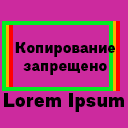
<style>
.page{position:relative;width:128px;height:128px;background:#cc2a9e}
.page>*{position:absolute;margin:0}
.t1{font:14.7px "Asket-ExtraBold";color:#000000}
.t2{font:18.7px "Asket-ExtraBold";color:#000000}
</style>
<div class="page">
<p class="t1" style="left:15px;top:42px;width:100px;height:33px;text-align:center">Копирование<br>запрещено</p>
<p class="t2" style="left:4px;top:93px;width:120px;height:19px">Lorem Ipsum</p>
</div>
